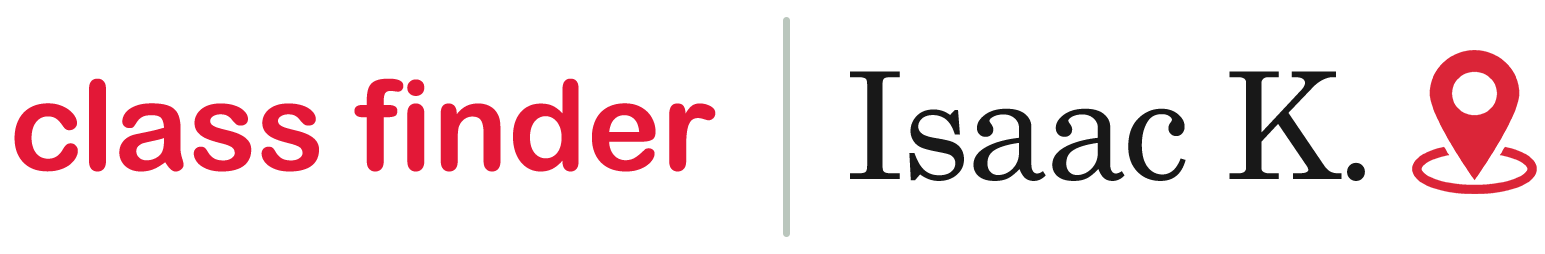
<style>
.page{position:relative;width:1545px;height:254px;background:#ffffff}
.page>*{position:absolute;margin:0}
.t1{font:125.1px "ArialRoundedMTBold";color:#e31837}
.t2{font:148.4px "Century";letter-spacing:-0.025em;color:#181818}
</style>
<div class="page">
<p class="t1" style="left:14px;top:78px;width:702px;height:94px">class finder</p>
<p class="t2" style="left:850px;top:71px;width:515px;height:110px">Isaac K.</p>
</div>
